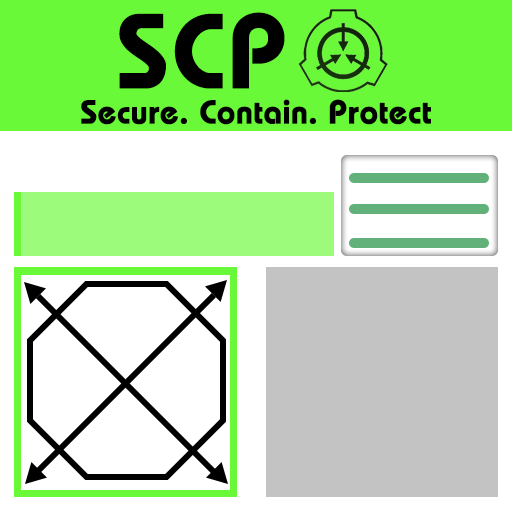
<style>
.page{position:relative;width:512px;height:512px;background:#ffffff}
.page>*{position:absolute;margin:0}
.t1{font:105.8px "BauhausLT-Demi";color:#000000;font-weight:bold}
.t2{font:33px "BauhausLT-Demi";color:#000000;font-weight:bold}
</style>
<div class="page">
<p class="t1" style="left:119px;top:12px;width:166px;height:77px">SCP</p>
<p class="t2" style="left:81px;top:99px;width:350px;height:26px">Secure. Contain. Protect</p>
</div>
